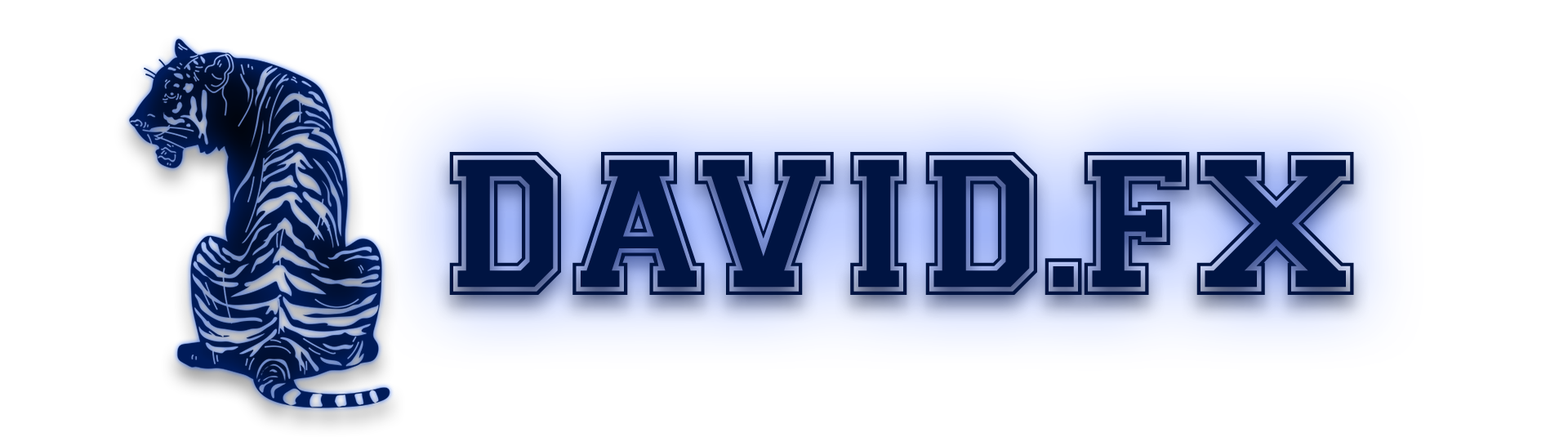
<style>
.page{position:relative;width:1568px;height:446px;background:#ffffff}
.page>*{position:absolute;margin:0}
.t1{font:204.2px "Varsity-Regular";color:#001442}
</style>
<div class="page">
<p class="t1" style="left:449px;top:152px;width:905px;height:143px">DAVID.FX</p>
</div>
